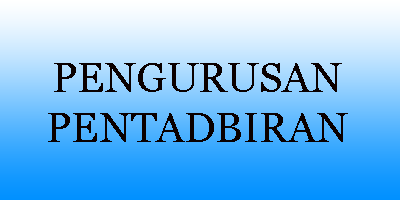
<style>
.page{position:relative;width:400px;height:200px}
.page>*{position:absolute;margin:0}
.t1{font:41.7px "Vani";color:#0a0000}
</style>
<div class="page">
<p class="t1" style="left:48px;top:63px;width:300px;height:79px;text-align:center">PENGURUSAN<br>PENTADBIRAN</p>
</div>
